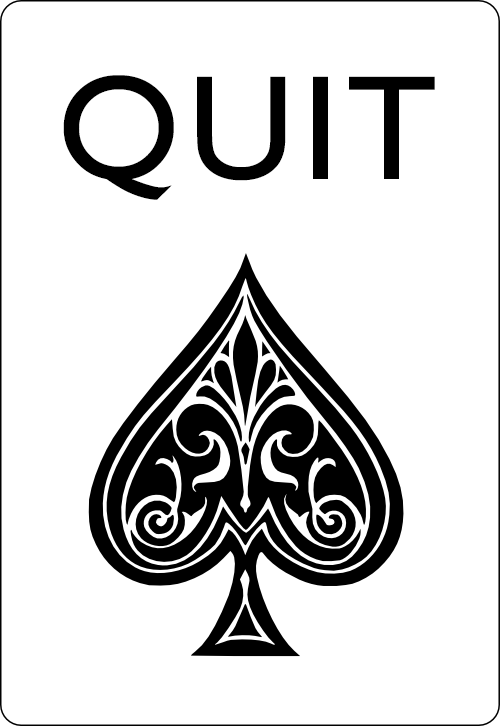
<style>
.page{position:relative;width:500px;height:726px;background:#ffffff}
.page>*{position:absolute;margin:0}
.t1{font:150px "GillSansMT";letter-spacing:0.05em;color:#000000}
</style>
<div class="page">
<p class="t1" style="left:63px;top:75px;width:372px;height:125px">QUIT</p>
</div>
